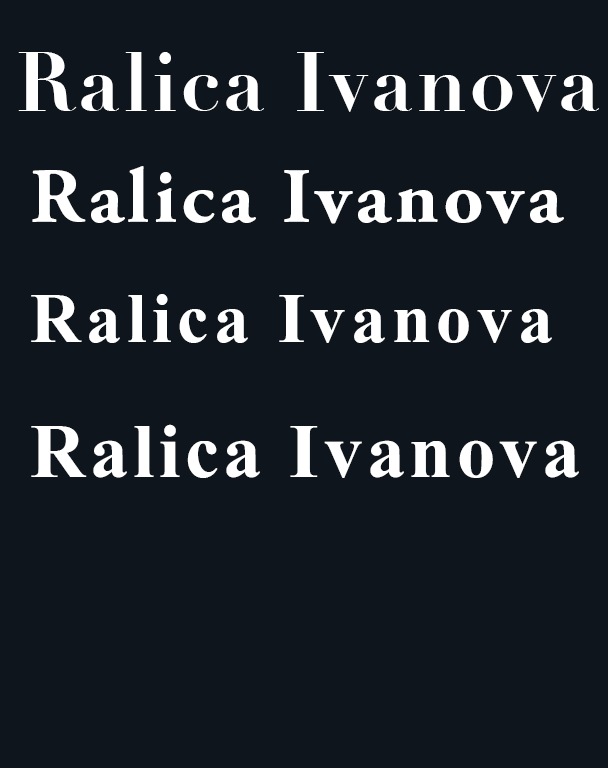
<style>
.page{position:relative;width:608px;height:768px;background:#0f151d}
.page>*{position:absolute;margin:0}
.t1{font:81px "DidotLHBold";letter-spacing:0.04em;color:#ffffff}
.t2{font:79px "AGaramondPro-Bold";letter-spacing:0.06em;color:#ffffff}
.t3{font:91px "Kokila-Bold";letter-spacing:0.06em;color:#ffffff}
.t4{font:75px "UKIJTuzBasma-Bold";letter-spacing:0.06em;color:#ffffff}
</style>
<div class="page">
<p class="t1" style="left:18px;top:52px;width:581px;height:60px">Ralica Ivanova</p>
<p class="t2" style="left:32px;top:166px;width:532px;height:58px">Ralica Ivanova</p>
<p class="t3" style="left:31px;top:294px;width:521px;height:49px">Ralica Ivanova</p>
<p class="t4" style="left:31px;top:424px;width:548px;height:54px">Ralica Ivanova</p>
</div>
